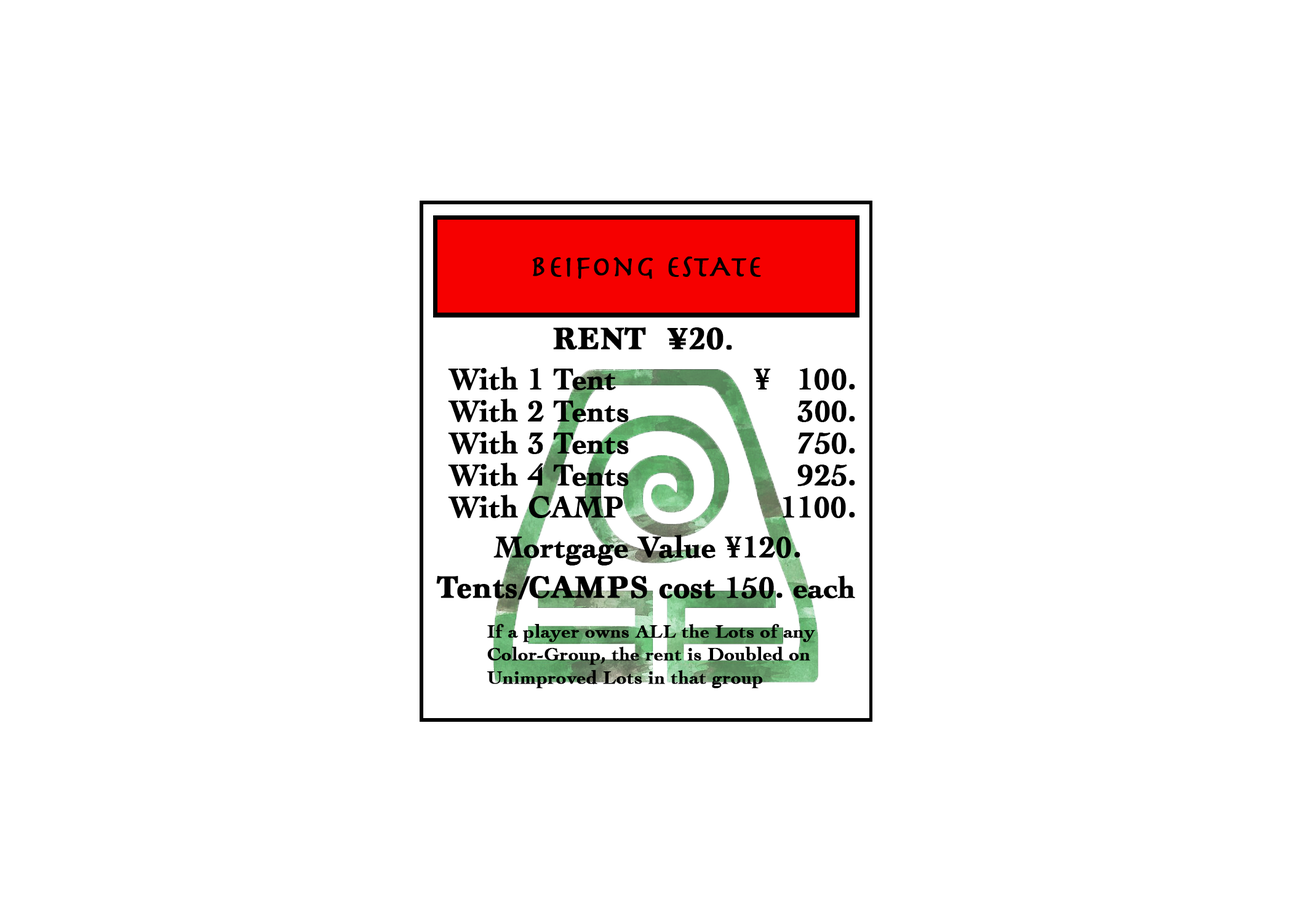
<style>
.page{position:relative;width:1292px;height:923px;background:#ffffff}
.page>*{position:absolute;margin:0}
.t1{font:30.8px "Herculanum";color:#000000;font-weight:bold}
.t2{font:32px "Marion-Bold";color:#000000;font-weight:bold}
.t3{font:30.8px "Cochin-Bold";color:#000000;font-weight:bold}
.t4{font:19.2px "Cochin-Bold";color:#000000;font-weight:bold}
</style>
<div class="page">
<p class="t1" style="left:532px;top:256px;width:229px;height:23px">beifong estAte</p>
<p class="t2" style="left:553px;top:327px;width:179px;height:23px">RENT  ¥20.</p>
<p class="t3" style="left:448px;top:367px;width:407px;height:23px">With 1 Tent               ¥   100.</p>
<p class="t3" style="left:448px;top:399px;width:407px;height:23px">With 2 Tents                   300.</p>
<p class="t3" style="left:448px;top:431px;width:407px;height:23px">With 3 Tents                   750.</p>
<p class="t3" style="left:448px;top:463px;width:407px;height:23px">With 4 Tents                   925.</p>
<p class="t3" style="left:448px;top:495px;width:407px;height:23px">With CAMP                1100.</p>
<p class="t3" style="left:493px;top:535px;width:307px;height:30px">Mortgage Value ¥120.</p>
<p class="t2" style="left:436px;top:575px;width:419px;height:25px">Tents/CAMPS cost <span class="t3">150. each</span></p>
<p class="t4" style="left:487px;top:624px;width:328px;height:64px">If a player owns ALL the Lots of any <br>Color-Group, the rent is Doubled on <br>Unimproved Lots in that group</p>
</div>
